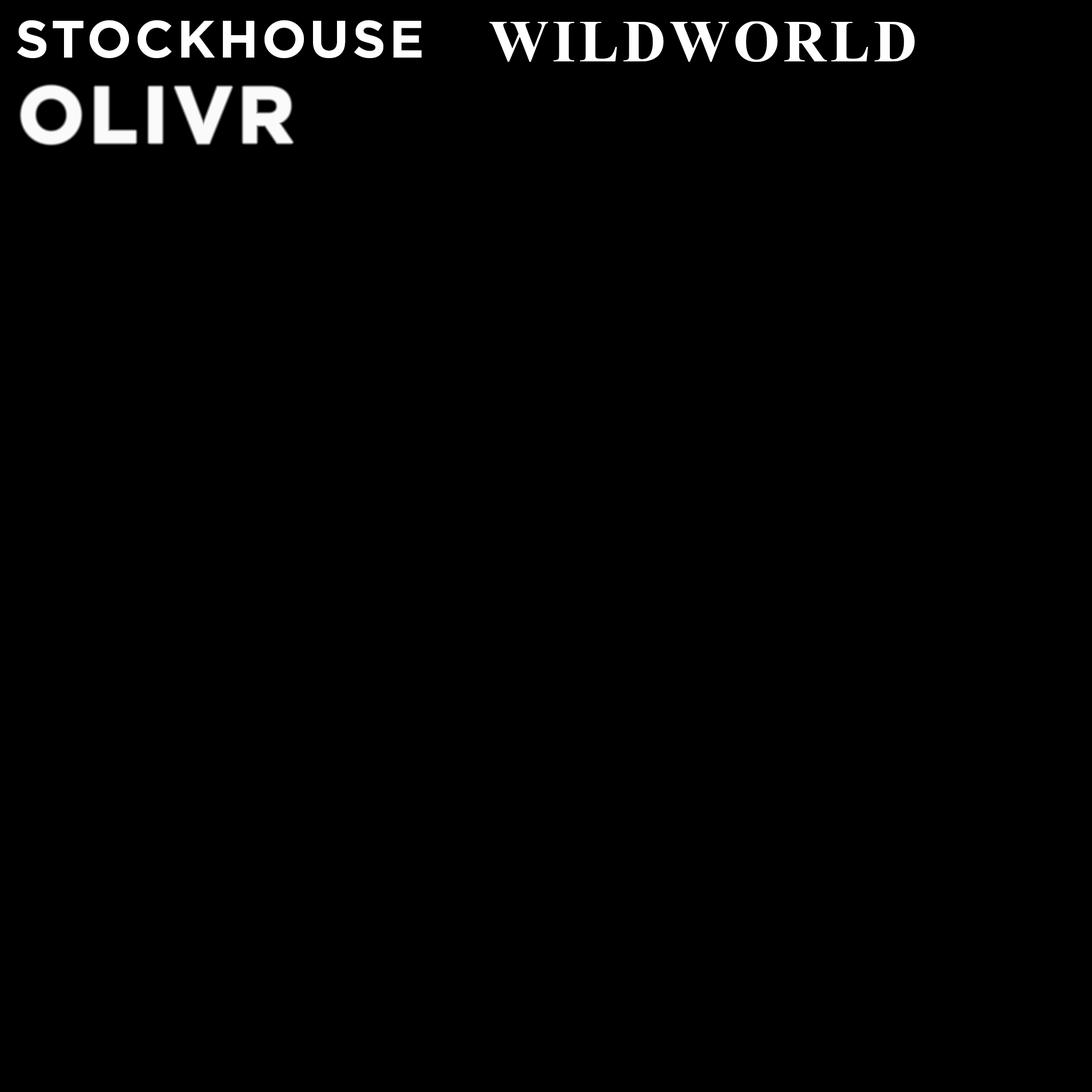
<style>
.page{position:relative;width:1092px;height:1092px;background:#000000}
.page>*{position:absolute;margin:0}
.t1{font:52.6px "GothamBold";letter-spacing:0.06em;color:#ffffff}
.t2{font:59.9px "TimesNewRomanPS-BoldMT";letter-spacing:0.06em;color:#ffffff}
.t3{font:78.7px "GothamBold";letter-spacing:0.06em;color:#fafafa}
</style>
<div class="page">
<p class="t1" style="left:17px;top:20px;width:405px;height:38px">STOCKHOUSE</p>
<p class="t2" style="left:489px;top:21px;width:426px;height:41px">WILDWORLD</p>
<p class="t3" style="left:22px;top:86px;width:270px;height:57px">OLIVR</p>
</div>
